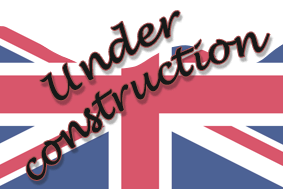
<style>
.page{position:relative;width:283px;height:189px;background:#ffffff}
.page>*{position:absolute;margin:0}
.t1{font:39.6px "LucidaHandwriting-Italic";color:#151918;scale:0.91 1}
</style>
<div class="page">
<p class="t1" style="left:26px;top:11px;width:244px;height:169px;text-align:center;rotate:-30deg">Under<br>construction</p>
</div>
